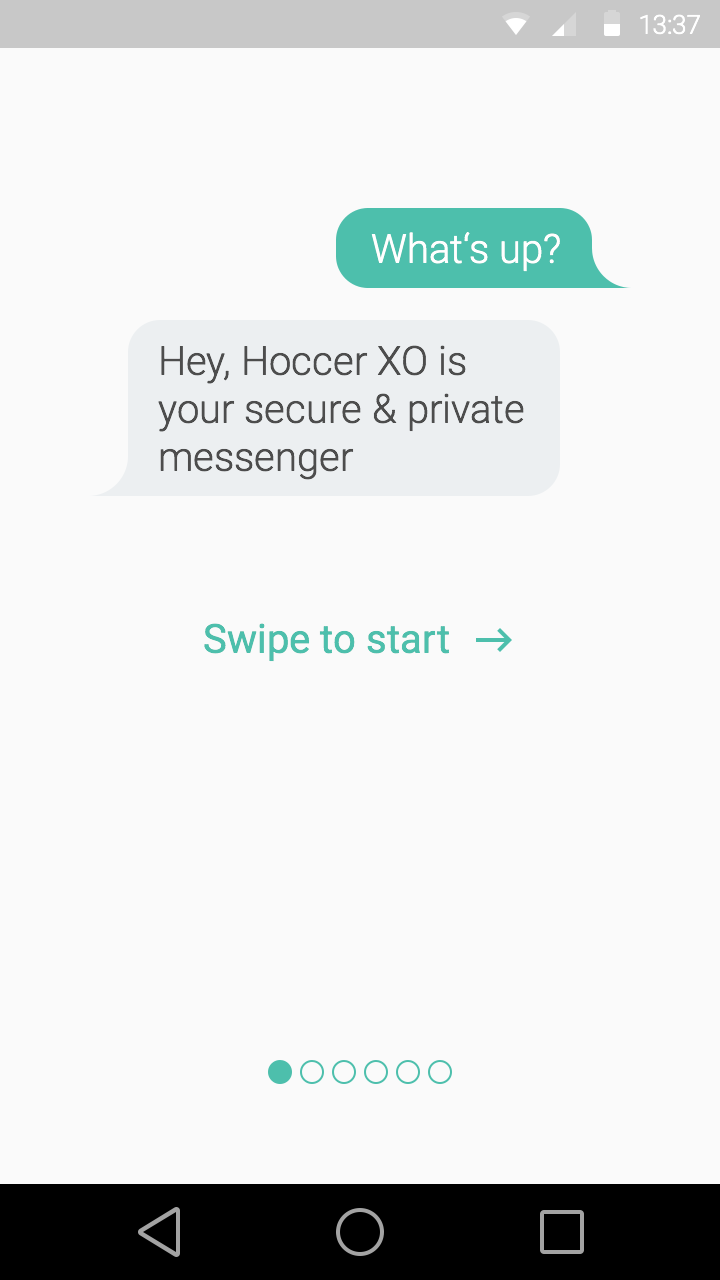
<style>
.page{position:relative;width:720px;height:1280px;background:#fafafa}
.page>*{position:absolute;margin:0}
.t1{font:26.1px "Roboto-Light";color:#ffffff}
.t2{font:40px "Roboto-Light";color:#ffffff}
.t3{font:40px/48px "Roboto-Light";color:#4d4d4d}
.t4{font:40px "Roboto-Regular";color:#4dbfac}
</style>
<div class="page">
<p class="t1" style="left:640px;top:14px;width:60px;height:21px">13:37</p>
<p class="t2" style="left:371px;top:232px;width:189px;height:40px">What‘s up?</p>
<p class="t3" style="left:158px;top:345px;width:366px;height:135px">Hey, Hoccer XO is<br>your secure &amp; private<br>messenger</p>
<p class="t4" style="left:204px;top:623px;width:245px;height:39px">Swipe to start</p>
</div>
